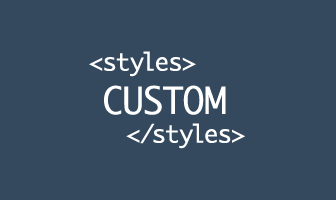
<style>
.page{position:relative;width:336px;height:200px;background:#34495e}
.page>*{position:absolute;margin:0}
.t1{font:24px "Monaco";color:#ffffff}
.t2{font:36px "Monaco";color:#ffffff;text-transform:uppercase}
</style>
<div class="page">
<p class="t1" style="left:89px;top:51px;width:156px;height:98px;text-align:center">&lt;styles&gt;   <br><span class="t2">custom<br></span>   &lt;/styles&gt;</p>
</div>
